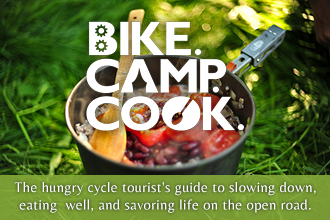
<style>
.page{position:relative;width:330px;height:220px}
.page>*{position:absolute;margin:0}
.t1{font:14.6px "Belleza-Regular";letter-spacing:0.025em;color:#ffffff}
</style>
<div class="page">
<p class="t1" style="left:14px;top:182px;width:302px;height:31px;text-align:center">The hungry cycle tourist's guide to slowing down,<br>eating  well, and savoring life on the open road.</p>
</div>
